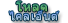
<style>
.page{position:relative;width:68px;height:23px;background:#ffffff}
.page>*{position:absolute;margin:0}
.t1{font:12px "Tahoma";letter-spacing:0.05em;color:#5cae70;font-weight:bold}
.t2{font:11px "Tahoma";letter-spacing:0.05em;font-weight:bold}
</style>
<div class="page">
<p class="t1" style="left:16px;top:1px;width:31px;height:11px">โหลด</p>
<p class="t2" style="left:9px;top:10px;width:50px;height:11px">ไคลเอ็นต์</p>
</div>
